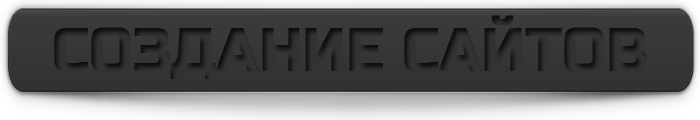
<style>
.page{position:relative;width:700px;height:120px}
.page>*{position:absolute;margin:0}
.t1{font:59.8px "RussoOne";color:#333333}
</style>
<div class="page">
<p class="t1" style="left:54px;top:15px;width:593px;height:64px">СОЗДАНИЕ САЙТОВ</p>
</div>
